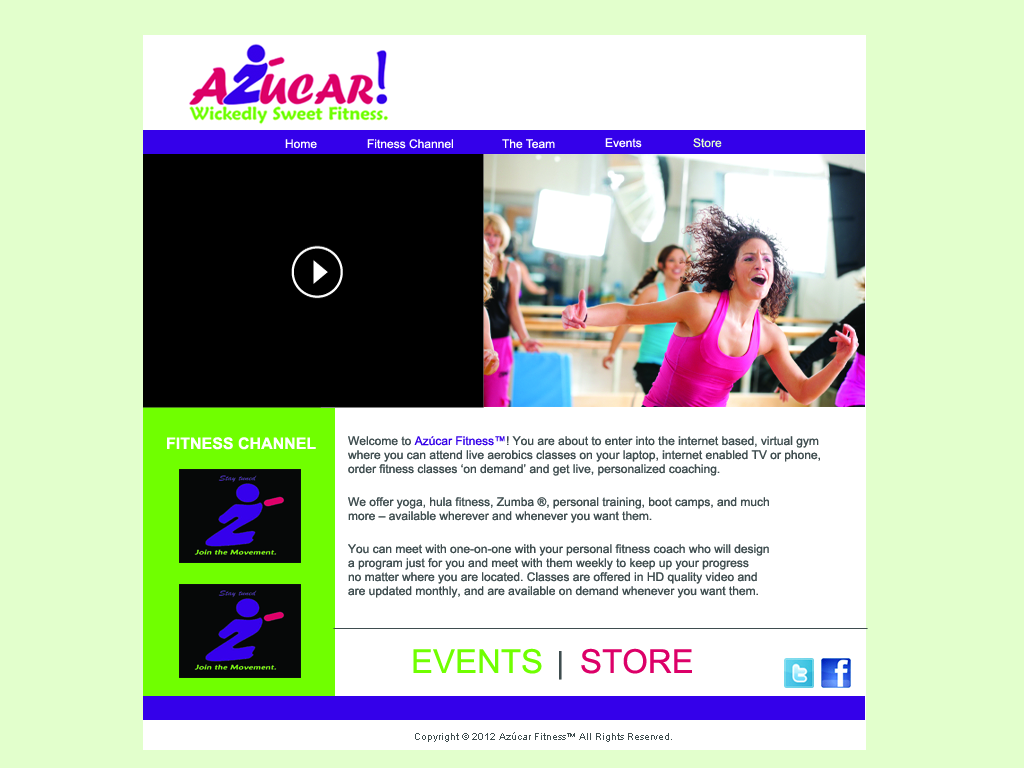
<style>
.page{position:relative;width:1024px;height:768px;background:#e2ffcc}
.page>*{position:absolute;margin:0}
.t1{font:12px "ArialMT";color:#ffffff}
.t2{font:12px "ArialMT";color:#e2ffcc}
.t3{font:16px "Arial-BoldMT";color:#ffffff}
.t4{font:12px/14px "ArialMT";color:#404e4f}
.t5{font:12px/14px "ArialMT";color:#3400e8}
.t6{font:33px "ArialMT";color:#70ff00}
.t7{font:30px "ArialMT";color:#404e4f}
.t8{font:33px "ArialMT";color:#dc0068}
.t9{font:10px "ArialMT";color:#404e4f}
</style>
<div class="page">
<p class="t1" style="left:285px;top:139px;width:32px;height:10px">Home</p>
<p class="t1" style="left:367px;top:139px;width:86px;height:10px">Fitness Channel</p>
<p class="t1" style="left:502px;top:139px;width:53px;height:10px">The Team</p>
<p class="t1" style="left:605px;top:138px;width:37px;height:10px">Events</p>
<p class="t2" style="left:693px;top:138px;width:29px;height:10px">Store</p>
<p class="t3" style="left:167px;top:437px;width:149px;height:13px">FITNESS CHANNEL</p>
<p class="t4" style="left:348px;top:436px;width:472px;height:162px">Welcome to <span class="t5">Azúcar Fitness™</span>! You are about to enter into the internet based, virtual gym<br>where you can attend live aerobics classes on your laptop, internet enabled TV or phone,<br>order fitness classes ‘on demand’ and get live, personalized coaching. <br><br>We offer yoga, hula fitness, Zumba ®, personal training, boot camps, and much <br>more – available wherever and whenever you want them.<br><br>You can meet with one-on-one with your personal fitness coach who will design<br>a program just for you and meet with them weekly to keep up your progress<br>no matter where you are located. Classes are offered in HD quality video and<br>are updated monthly, and are available on demand whenever you want them.</p>
<p class="t6" style="left:413px;top:648px;width:279px;height:32px">EVENTS    <span class="t7">|   </span><span class="t8">STORE</span></p>
<p class="t9" style="left:415px;top:732px;width:257px;height:10px">Copyright © 2012 Azúcar Fitness™ All Rights Reserved.</p>
</div>
